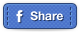
<style>
.page{position:relative;width:80px;height:32px}
.page>*{position:absolute;margin:0}
.t1{font:12px "HelveticaNeue-Bold";color:#ffffff}
</style>
<div class="page">
<p class="t1" style="left:30px;top:11px;width:33px;height:10px">Share</p>
</div>
